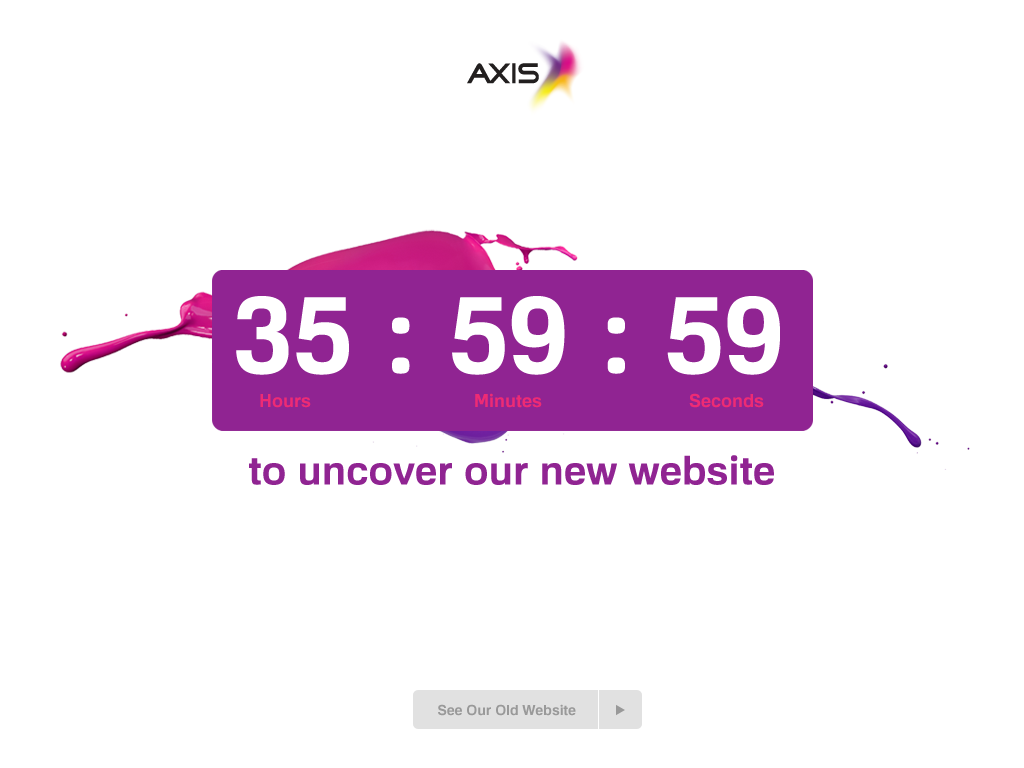
<style>
.page{position:relative;width:1024px;height:768px;background:#ffffff}
.page>*{position:absolute;margin:0}
.t1{font:107.8px "FamiliarPro-Bold";color:#ffffff}
.t2{font:18px "FamiliarPro-Bold";color:#ee2b74}
.t3{font:40px "FamiliarPro-Bold";color:#902492}
.t4{font:14px "FamiliarPro-Bold";color:#999999}
</style>
<div class="page">
<p class="t1" style="left:236px;top:296px;width:544px;height:79px">35 : 59 : 59</p>
<p class="t2" style="left:260px;top:394px;width:51px;height:14px">Hours</p>
<p class="t2" style="left:475px;top:393px;width:67px;height:15px">Minutes</p>
<p class="t2" style="left:689px;top:393px;width:75px;height:15px">Seconds</p>
<p class="t3" style="left:249px;top:455px;width:525px;height:30px">to uncover our new website</p>
<p class="t4" style="left:438px;top:704px;width:138px;height:12px">See Our Old Website</p>
</div>
